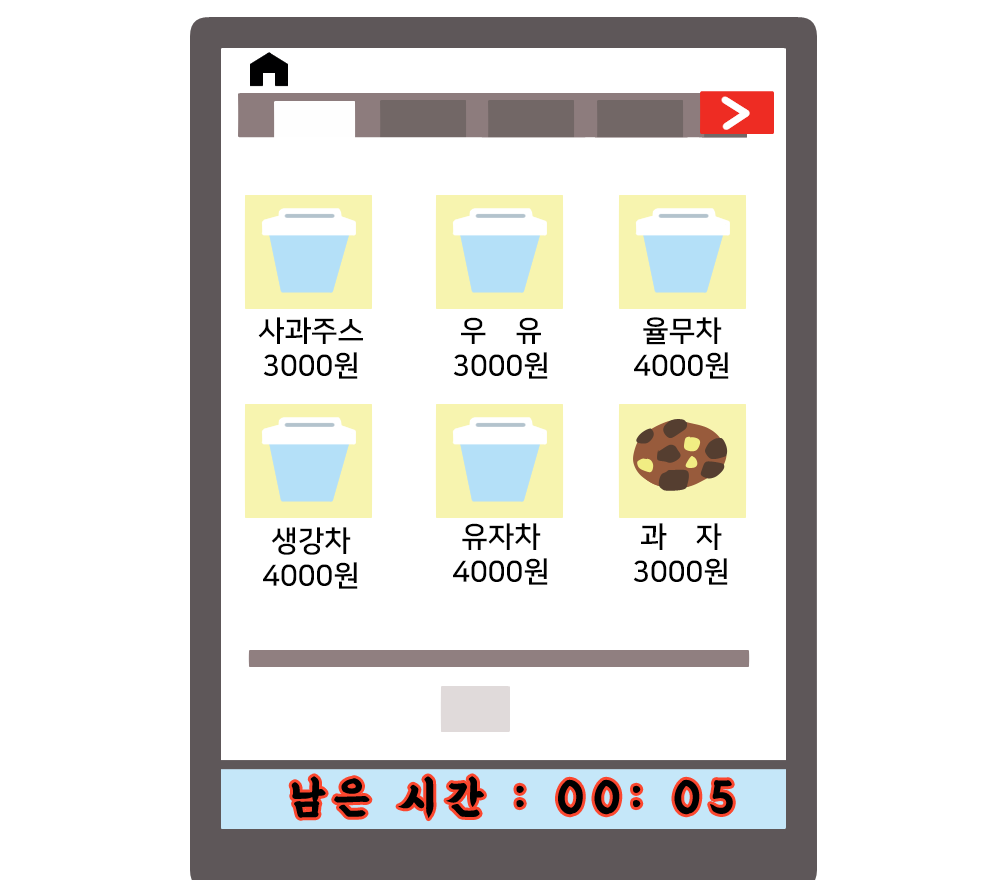
<style>
.page{position:relative;width:1000px;height:880px;background:#ffffff}
.page>*{position:absolute;margin:0}
.t1{font:29.2px "NanumSquareB";color:#000000}
</style>
<div class="page">
<p class="t1" style="left:258px;top:317px;width:105px;height:62px;text-align:center">사과주스<br>3000원</p>
<p class="t1" style="left:453px;top:317px;width:95px;height:62px;text-align:center">우    유<br>3000원</p>
<p class="t1" style="left:634px;top:317px;width:95px;height:62px;text-align:center">율무차<br>4000원</p>
<p class="t1" style="left:263px;top:527px;width:95px;height:62px;text-align:center">생강차<br>4000원</p>
<p class="t1" style="left:453px;top:523px;width:95px;height:62px;text-align:center">유자차<br>4000원</p>
<p class="t1" style="left:633px;top:523px;width:95px;height:62px;text-align:center">과    자<br>3000원</p>
</div>
